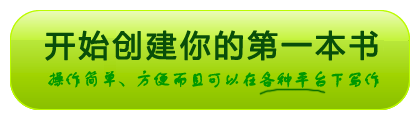
<style>
.page{position:relative;width:420px;height:120px;background:#ffffff}
.page>*{position:absolute;margin:0}
.t1{font:30px "MicrosoftYaHei";letter-spacing:0.1em;color:#094e09;font-weight:bold}
.t2{font:18px "FZSTK--GBK1-0";letter-spacing:-0.05em;color:#009900;font-weight:bold}
</style>
<div class="page">
<p class="t1" style="left:45px;top:30px;width:333px;height:31px">开始创建你的第一本书</p>
<p class="t2" style="left:48px;top:70px;width:331px;height:18px">操作简单、方便而且可以在各种平台下写作</p>
</div>
